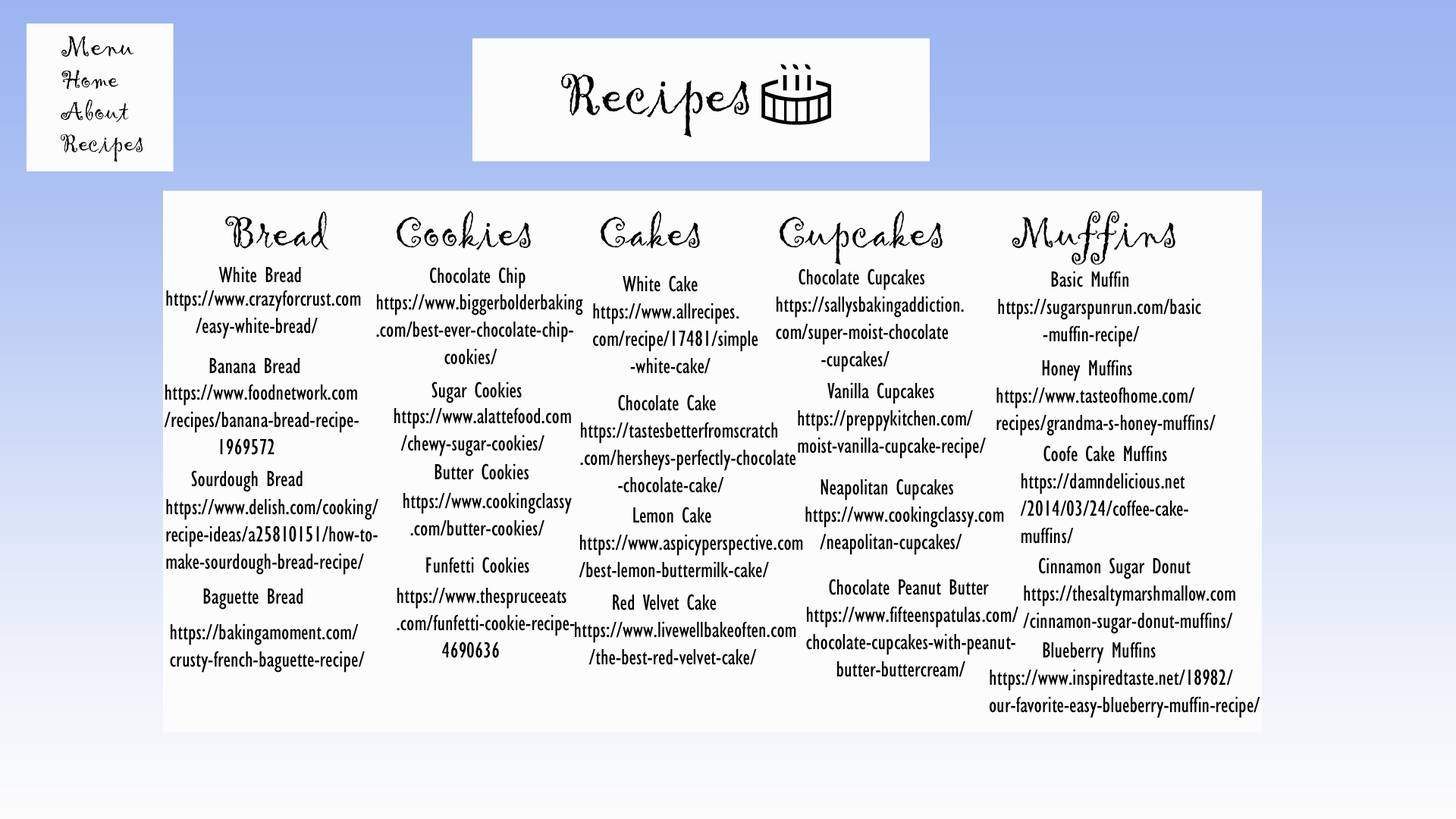
<style>
.page{position:relative;width:1456px;height:819px;background:#fcfcfc}
.page>*{position:absolute;margin:0}
.t1{font:26.5px "Gigi-Regular";color:#000000}
.t2{font:30.3px "Gigi-Regular";color:#000000}
.t3{font:60.7px "Gigi-Regular";color:#000000}
.t4{font:60.7px "MSOutlook";color:#000000}
.t5{font:45.5px "Gigi-Regular";color:#000000}
.t6{font:22.7px "GillSansMT-Condensed";color:#000000}
</style>
<div class="page">
<p class="t1" style="left:61px;top:36px;width:82px;height:126px"><span class="t2">Menu<br></span>Home<br>About<br>Recipes</p>
<p class="t3" style="left:561px;top:64px;width:270px;height:73px">Recipes <span class="t4">I</span></p>
<p class="t5" style="left:225px;top:210px;width:950px;height:55px">Bread       Cookies       Cakes        Cupcakes       Muffins</p>
<p class="t6" style="left:218px;top:266px;width:83px;height:17px">White Bread</p>
<p class="t6" style="left:430px;top:267px;width:96px;height:22px">Chocolate Chip</p>
<p class="t6" style="left:776px;top:268px;width:188px;height:104px">Chocolate Cupcakes<br>https://sallysbakingaddiction.<br>com/super-moist-chocolate<br>      -cupcakes/</p>
<p class="t6" style="left:593px;top:275px;width:165px;height:99px">White Cake<br>https://www.allrecipes.<br>com/recipe/17481/simple<br>     -white-cake/</p>
<p class="t6" style="left:998px;top:271px;width:203px;height:76px">Basic Muffin<br>https://sugarspunrun.com/basic<br>      -muffin-recipe/</p>
<p class="t6" style="left:166px;top:290px;width:195px;height:49px">https://www.crazyforcrust.com<br>    /easy-white-bread/</p>
<p class="t6" style="left:376px;top:293px;width:207px;height:72px">https://www.biggerbolderbaking<br>.com/best-ever-chocolate-chip-<br>         cookies/</p>
<p class="t6" style="left:209px;top:358px;width:91px;height:16px">Banana Bread</p>
<p class="t6" style="left:996px;top:359px;width:220px;height:77px">Honey Muffins<br>https://www.tasteofhome.com/<br>recipes/grandma-s-honey-muffins/</p>
<p class="t6" style="left:164px;top:384px;width:195px;height:71px">https://www.foodnetwork.com<br>/recipes/banana-bread-recipe-<br>       1969572</p>
<p class="t6" style="left:431px;top:381px;width:91px;height:22px">Sugar Cookies</p>
<p class="t6" style="left:798px;top:382px;width:188px;height:77px">Vanilla Cupcakes<br>https://preppykitchen.com/<br>moist-vanilla-cupcake-recipe/</p>
<p class="t6" style="left:580px;top:394px;width:215px;height:99px">Chocolate Cake<br>https://tastesbetterfromscratch<br>.com/hersheys-perfectly-chocolate<br>     -chocolate-cake/</p>
<p class="t6" style="left:394px;top:407px;width:177px;height:50px">https://www.alattefood.com<br> /chewy-sugar-cookies/</p>
<p class="t6" style="left:1020px;top:445px;width:168px;height:99px">Coofe Cake Muffins<br>https://damndelicious.net<br>/2014/03/24/coffee-cake-<br>muffins/</p>
<p class="t6" style="left:191px;top:470px;width:112px;height:22px">Sourdough Bread</p>
<p class="t6" style="left:435px;top:463px;width:94px;height:17px">Butter Cookies</p>
<p class="t6" style="left:805px;top:479px;width:199px;height:76px">Neapolitan Cupcakes<br>https://www.cookingclassy.com<br>  /neapolitan-cupcakes/</p>
<p class="t6" style="left:403px;top:492px;width:169px;height:44px">https://www.cookingclassy<br> .com/butter-cookies/</p>
<p class="t6" style="left:166px;top:498px;width:212px;height:77px">https://www.delish.com/cooking/<br>recipe-ideas/a25810151/how-to-<br>make-sourdough-bread-recipe/</p>
<p class="t6" style="left:579px;top:507px;width:224px;height:71px">Lemon Cake<br>https://www.aspicyperspective.com<br>/best-lemon-buttermilk-cake/</p>
<p class="t6" style="left:426px;top:557px;width:103px;height:16px">Funfetti Cookies</p>
<p class="t6" style="left:1023px;top:557px;width:212px;height:77px">Cinnamon Sugar Donut <br>https://thesaltymarshmallow.com<br>/cinnamon-sugar-donut-muffins/</p>
<p class="t6" style="left:806px;top:579px;width:212px;height:98px">Chocolate Peanut Butter<br>https://www.fifteenspatulas.com/<br>chocolate-cupcakes-with-peanut-<br>    butter-buttercream/</p>
<p class="t6" style="left:203px;top:588px;width:100px;height:22px">Baguette Bread</p>
<p class="t6" style="left:397px;top:588px;width:178px;height:70px">https://www.thespruceeats<br>.com/funfetti-cookie-recipe-<br>      4690636</p>
<p class="t6" style="left:575px;top:594px;width:221px;height:71px">Red Velvet Cake<br>https://www.livewellbakeoften.com<br>  /the-best-red-velvet-cake/</p>
<p class="t6" style="left:170px;top:623px;width:195px;height:50px">https://bakingamoment.com/<br>crusty-french-baguette-recipe/</p>
<p class="t6" style="left:990px;top:642px;width:270px;height:76px">Blueberry Muffins<br>https://www.inspiredtaste.net/18982/<br>our-favorite-easy-blueberry-muffin-recipe/</p>
</div>
